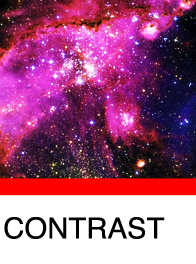
<style>
.page{position:relative;width:196px;height:264px;background:#ffffff}
.page>*{position:absolute;margin:0}
.t1{font:28.9px "Helvetica";color:#000000}
</style>
<div class="page">
<p class="t1" style="left:4px;top:217px;width:161px;height:22px">CONTRAST</p>
</div>
